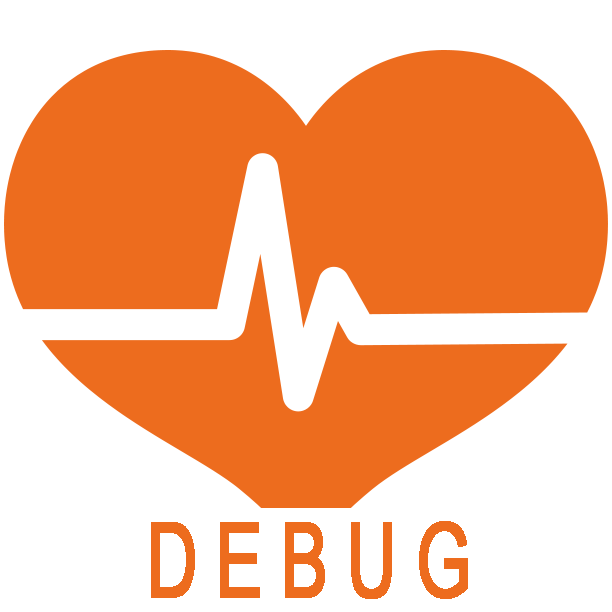
<style>
.page{position:relative;width:612px;height:612px;background:#ed6c1e}
.page>*{position:absolute;margin:0}
.t1{font:103.9px "ArialNarrow";letter-spacing:0.2em;color:#ed6c1e;font-weight:bold;scale:0.8 1}
</style>
<div class="page">
<p class="t1" style="left:151px;top:521px;width:317px;height:78px">DEBUG</p>
</div>
